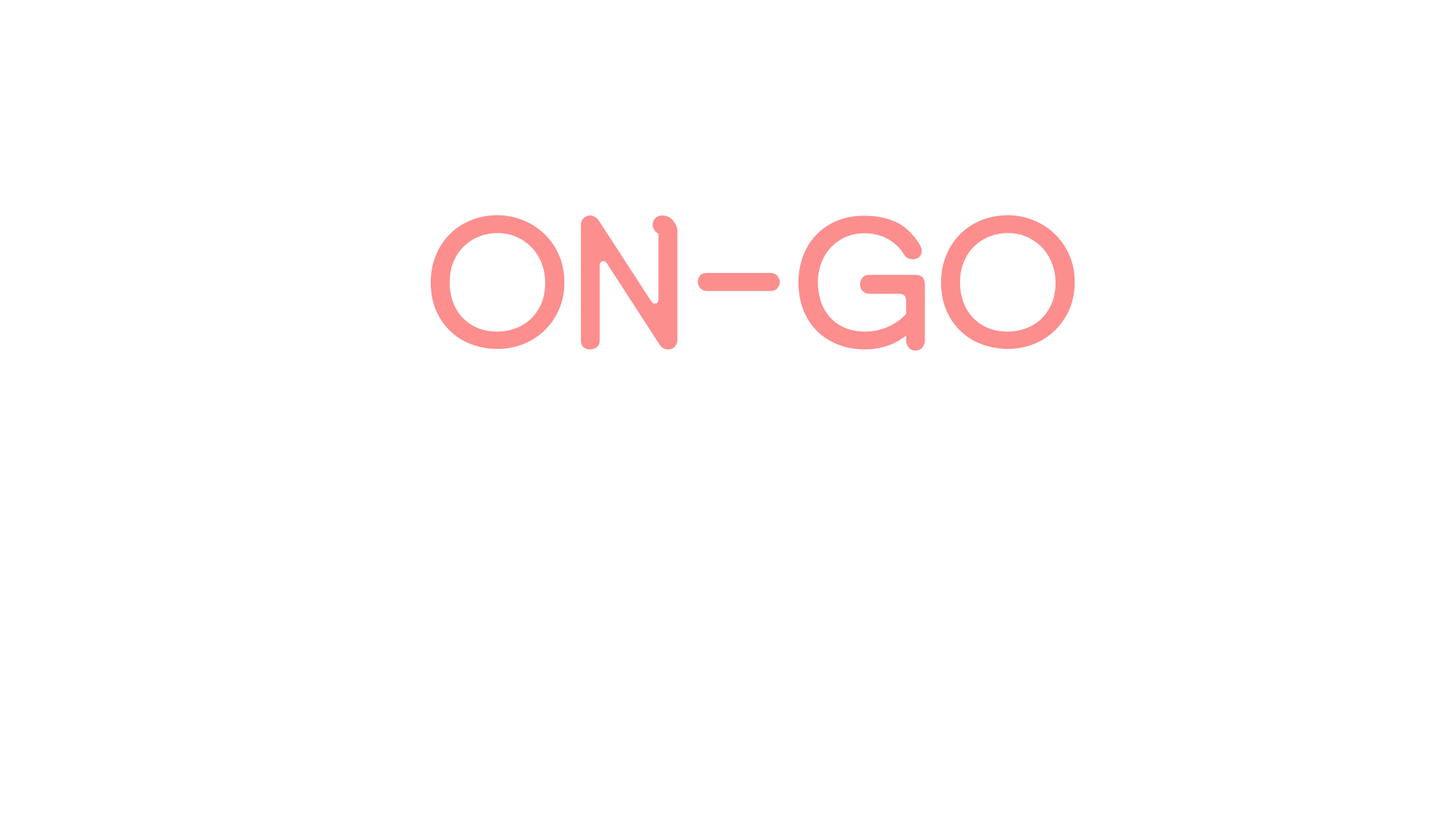
<style>
.page{position:relative;width:1456px;height:819px;background:#ffffff}
.page>*{position:absolute;margin:0}
.t1{font:233.8px "YanoljaYacheR";color:#fc8e8e}
</style>
<div class="page">
<p class="t1" style="left:431px;top:215px;width:644px;height:136px">ON-GO</p>
</div>
